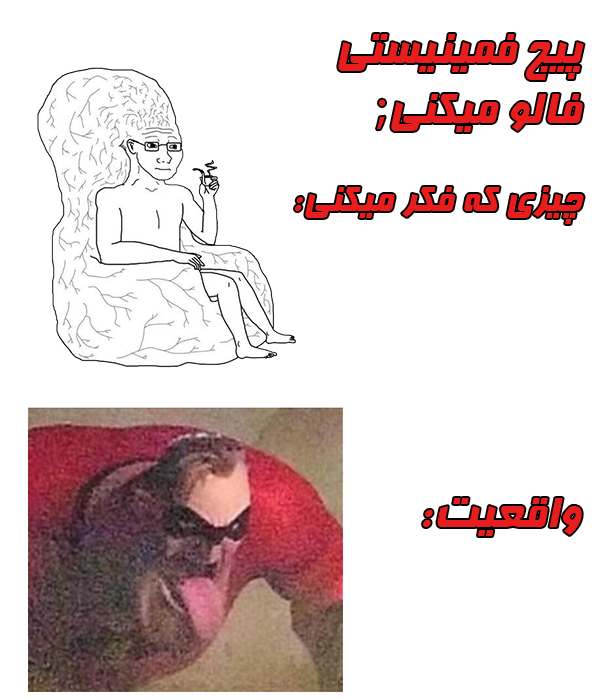
<style>
.page{position:relative;width:607px;height:700px;background:#ffffff}
.page>*{position:absolute;margin:0}
.t1{font:50px "Far.Farnaz";color:#e81e1e}
.t2{font:50px "MyriadPro-Regular";color:#e81e1e}
.t3{font:41.7px "Far.Farnaz";color:#e81e1e}
</style>
<div class="page">
<p class="t1" style="left:338px;top:34px;width:246px;height:98px">پیج فمینیستی فالو میکنی<span class="t2">;</span></p>
<p class="t3" style="left:295px;top:187px;width:289px;height:37px">چیزی که فکر میکنی:</p>
<p class="t1" style="left:423px;top:498px;width:159px;height:38px">واقعیت:</p>
</div>
